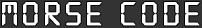
<style>
.page{position:relative;width:202px;height:28px;background:#333333}
.page>*{position:absolute;margin:0}
.t1{font:36px "DS-Digital";letter-spacing:0.075em;color:#ffffff;font-weight:bold}
</style>
<div class="page">
<p class="t1" style="left:2px;top:2px;width:198px;height:24px">Morse code</p>
</div>
